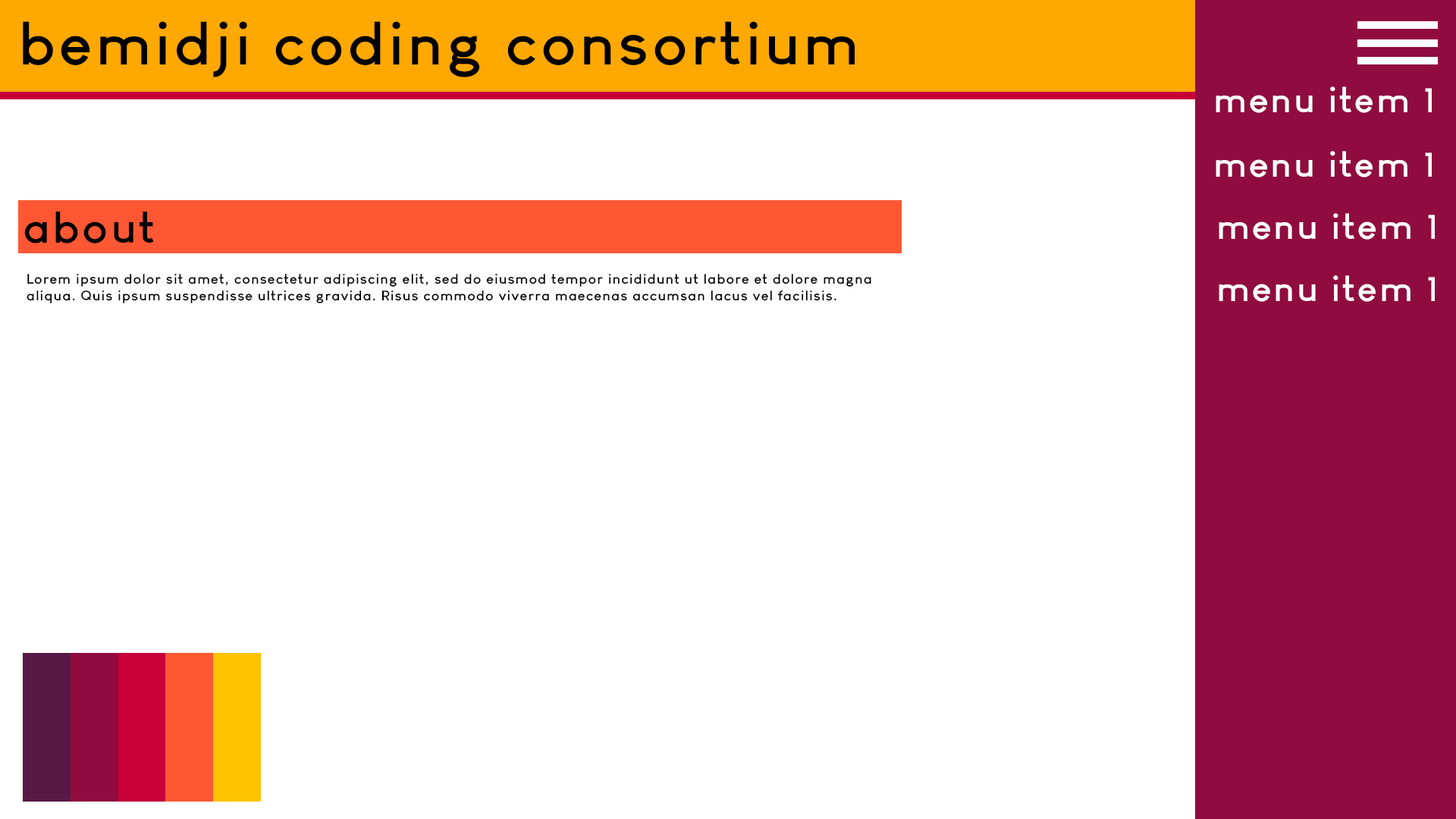
<style>
.page{position:relative;width:1456px;height:819px;background:#ffffff}
.page>*{position:absolute;margin:0}
.t1{font:60px "LouisGeorgeCafe-Bold";letter-spacing:0.05em;color:#000000;scale:1.06 1}
.t2{font:35.7px "LouisGeorgeCafe-Bold";letter-spacing:0.05em;color:#ffffff;scale:1.06 1}
.t3{font:43.6px "LouisGeorgeCafe-Bold";letter-spacing:0.05em;color:#000000;scale:1.06 1}
.t4{font:13.6px "LouisGeorgeCafe-Bold";letter-spacing:0.05em;color:#000000;scale:1.06 1}
</style>
<div class="page">
<p class="t1" style="left:23px;top:21px;width:832px;height:56px">bemidji coding consortium</p>
<p class="t2" style="left:1216px;top:86px;width:216px;height:27px">menu item 1</p>
<p class="t2" style="left:1216px;top:151px;width:216px;height:26px">menu item 1</p>
<p class="t3" style="left:24px;top:212px;width:130px;height:31px">about</p>
<p class="t2" style="left:1219px;top:213px;width:216px;height:27px">menu item 1</p>
<p class="t4" style="left:27px;top:274px;width:844px;height:29px">Lorem ipsum dolor sit amet, consectetur adipiscing elit, sed do eiusmod tempor incididunt ut labore et dolore magna aliqua. Quis ipsum suspendisse ultrices gravida. Risus commodo viverra maecenas accumsan lacus vel facilisis.</p>
<p class="t2" style="left:1219px;top:275px;width:216px;height:27px">menu item 1</p>
</div>
